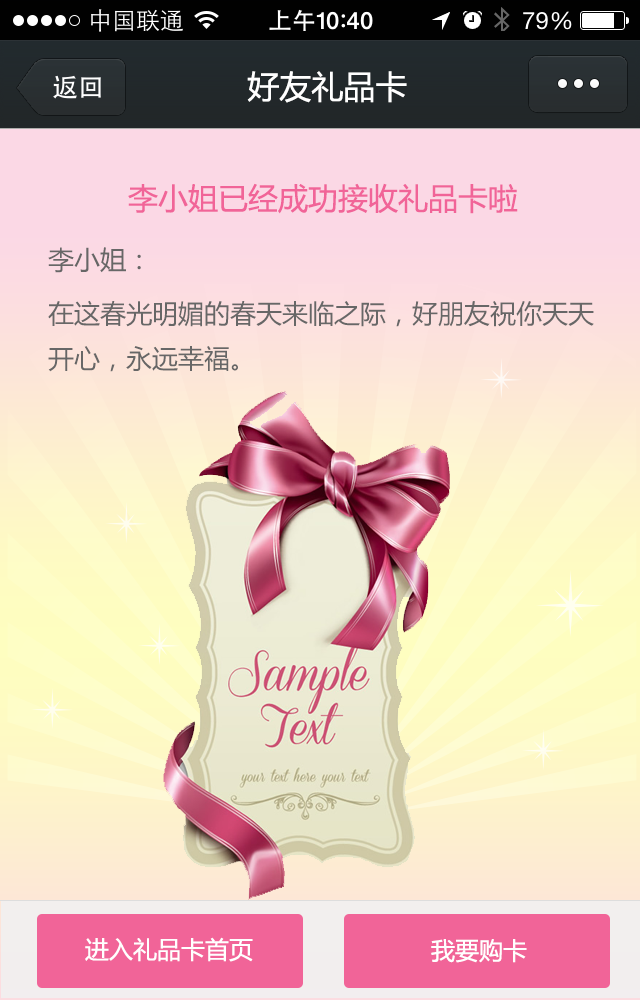
<style>
.page{position:relative;width:640px;height:1000px}
.page>*{position:absolute;margin:0}
.t1{font:32px "MicrosoftYaHei";color:#ffffff}
.t2{font:30px "MicrosoftYaHei";color:#f16498}
.t3{font:26px "MicrosoftYaHei";color:#676767}
.t4{font:26px/45px "MicrosoftYaHei";color:#676767}
.t5{font:24px "MicrosoftYaHei";color:#ffffff}
</style>
<div class="page">
<p class="t1" style="left:247px;top:71px;width:160px;height:32px">好友礼品卡</p>
<p class="t2" style="left:128px;top:183px;width:390px;height:31px">李小姐已经成功接收礼品卡啦</p>
<p class="t3" style="left:48px;top:247px;width:93px;height:26px">李小姐：</p>
<p class="t4" style="left:48px;top:300px;width:546px;height:72px">在这春光明媚的春天来临之际，好朋友祝你天天开心，永远幸福。</p>
<p class="t5" style="left:85px;top:937px;width:168px;height:25px">进入礼品卡首页</p>
<p class="t5" style="left:431px;top:939px;width:96px;height:24px">我要购卡</p>
</div>
